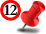
<style>
.page{position:relative;width:46px;height:34px;background:#ffffff}
.page>*{position:absolute;margin:0}
.t1{font:16px "Garamond-Bold";color:#000000}
</style>
<div class="page">
<p class="t1" style="left:4px;top:4px;width:13px;height:11px">12</p>
</div>
